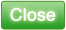
<style>
.page{position:relative;width:66px;height:30px}
.page>*{position:absolute;margin:0}
.t1{font:17px "Helvetica";color:#ffffff;font-weight:bold}
</style>
<div class="page">
<p class="t1" style="left:10px;top:8px;width:46px;height:13px">Close</p>
</div>
